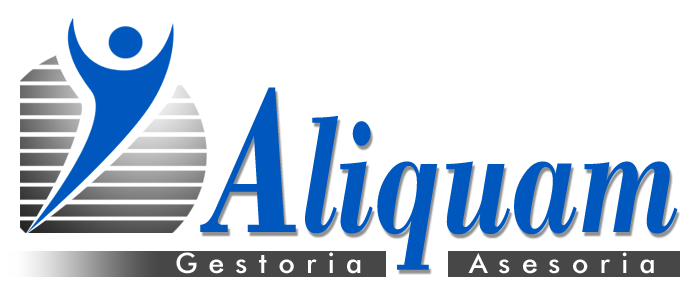
<style>
.page{position:relative;width:700px;height:289px;background:#ffffff}
.page>*{position:absolute;margin:0}
.t1{font:175px "BodoniBT-BoldItalic";color:#0058be;scale:0.71 1}
.t2{font:217px "BodoniBT-BoldItalic";color:#0058be;scale:0.71 1}
.t3{font:28px "FuturaBT-Medium";letter-spacing:0.4em;color:#ffffff}
</style>
<div class="page">
<p class="t1" style="left:200px;top:87px;width:478px;height:183px"><span class="t2">A</span>liquam</p>
<p class="t3" style="left:176px;top:252px;width:185px;height:22px">Gestoria</p>
<p class="t3" style="left:468px;top:252px;width:186px;height:22px">Asesoria</p>
</div>
